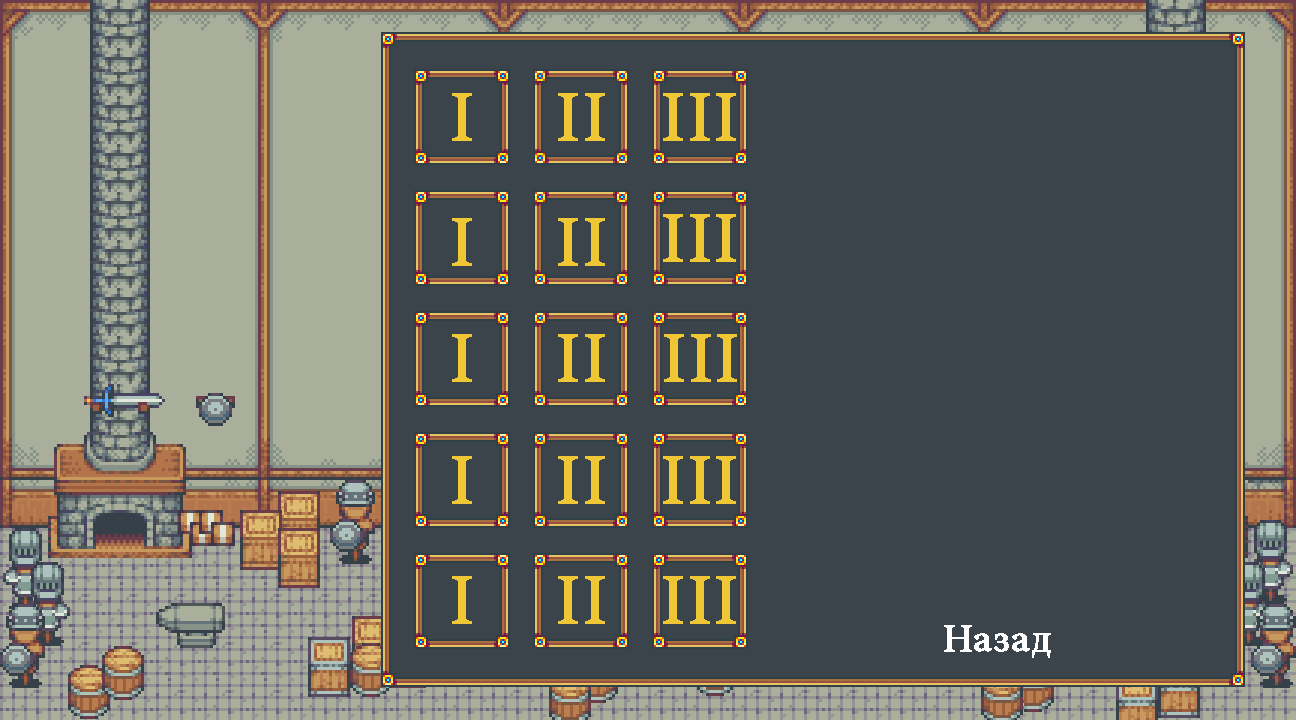
<style>
.page{position:relative;width:1296px;height:720px;background:#3b444b}
.page>*{position:absolute;margin:0}
.t1{font:72px "MinionPro-Medium";color:#efc633;font-weight:bold}
</style>
<div class="page">
<p class="t1" style="left:452px;top:93px;width:20px;height:48px">I</p>
<p class="t1" style="left:558px;top:93px;width:47px;height:48px">II</p>
<p class="t1" style="left:663px;top:93px;width:73px;height:48px">III</p>
</div>
